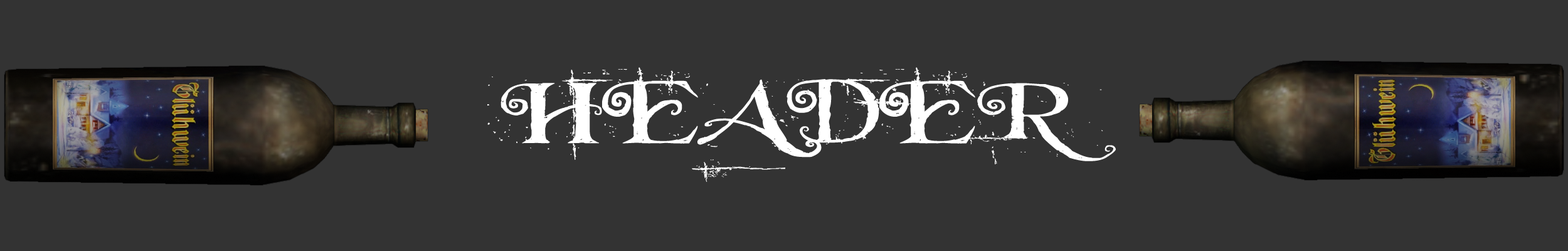
<style>
.page{position:relative;width:1568px;height:251px;background:#333333}
.page>*{position:absolute;margin:0}
.t1{font:94.1px "BeyondWonderland";color:#ffffff;scale:1.3 1}
</style>
<div class="page">
<p class="t1" style="left:487px;top:67px;width:629px;height:115px">HEADER</p>
</div>
